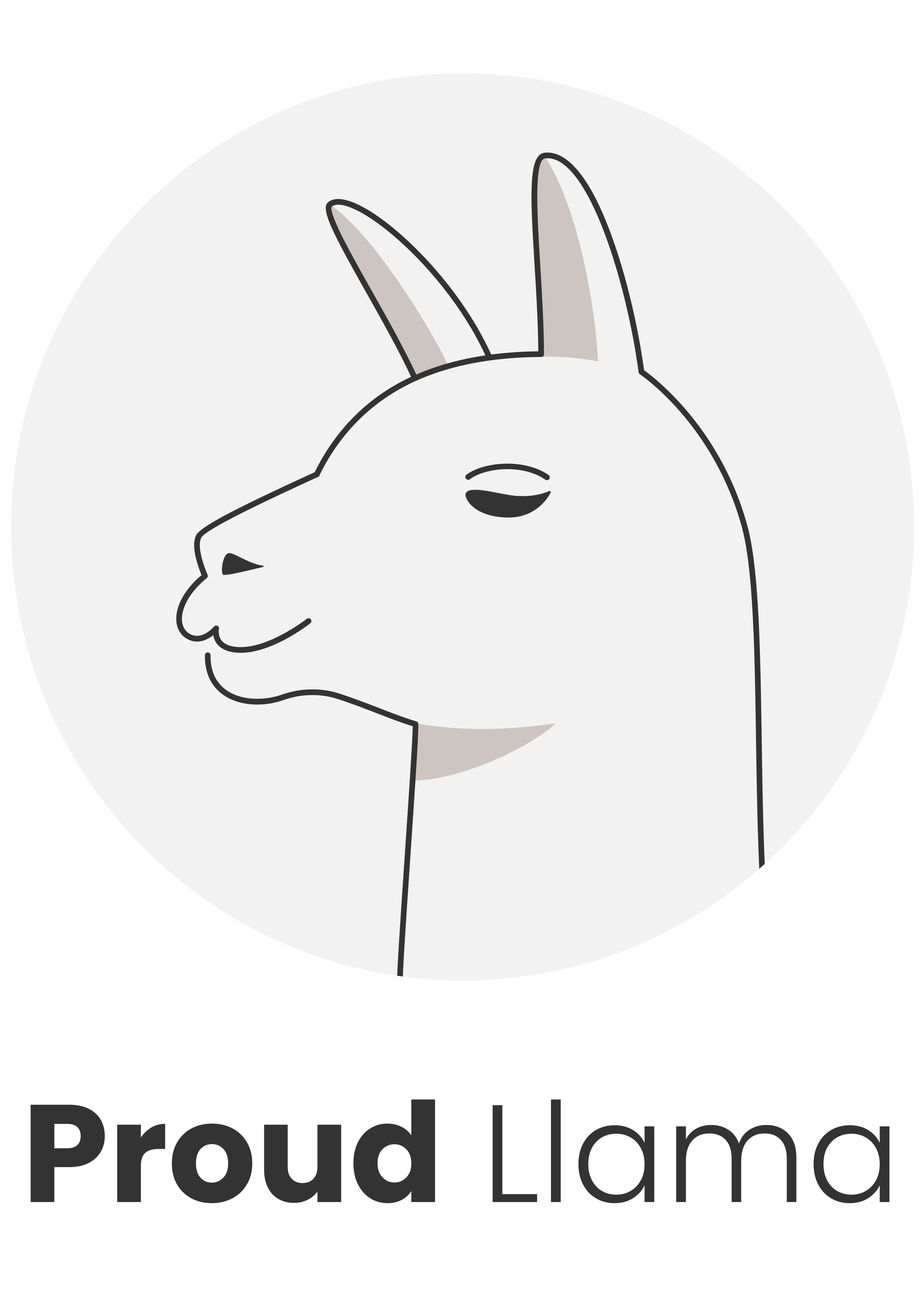
<style>
.page{position:relative;width:921px;height:1294px;background:#f2f2f2}
.page>*{position:absolute;margin:0}
.t1{font:138.6px "Poppins-Bold";color:#333333}
.t2{font:138.6px "Poppins-Light";color:#333333}
</style>
<div class="page">
<p class="t1" style="left:31px;top:1099px;width:859px;height:105px">Proud<span class="t2"> Llama</span></p>
</div>
